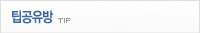
<style>
.page{position:relative;width:200px;height:33px}
.page>*{position:absolute;margin:0}
.t1{font:14px "YGO550";letter-spacing:-0.075em;color:#3a66a2;scale:0.9 1}
.t2{font:8px "Kroeger0553";color:#999999;text-transform:uppercase}
</style>
<div class="page">
<p class="t1" style="left:12px;top:10px;width:41px;height:14px">팁공유방</p>
<p class="t2" style="left:58px;top:18px;width:13px;height:5px">tip</p>
</div>
